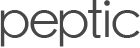
<style>
.page{position:relative;width:140px;height:48px;background:#ffffff}
.page>*{position:absolute;margin:0}
.t1{font:50px "STHeiti";color:#474747}
</style>
<div class="page">
<p class="t1" style="left:0px;top:0px;width:140px;height:47px">peptic</p>
</div>
